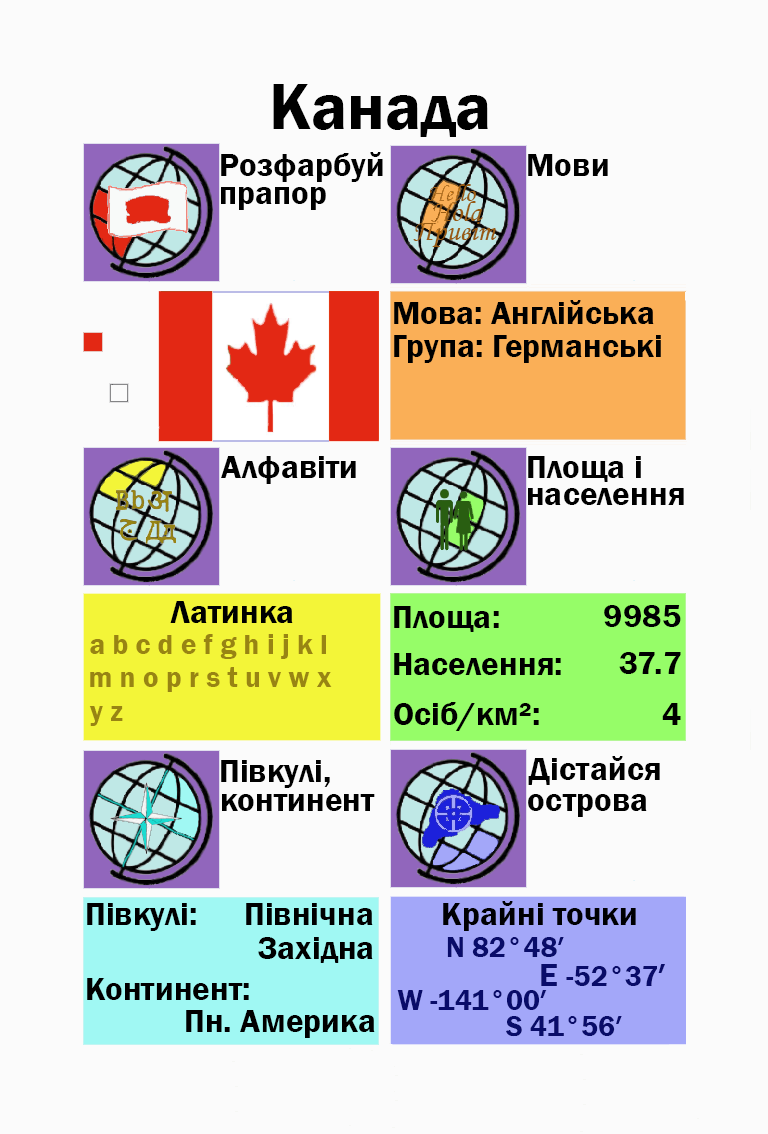
<style>
.page{position:relative;width:768px;height:1134px;background:#fbfbfb}
.page>*{position:absolute;margin:0}
.t1{font:66.7px "FranklinGothic-Demi";color:#000000}
.t2{font:33.3px "FranklinGothic-Demi";color:#000000}
.t3{font:33.3px "FranklinGothic-Demi";color:#000003}
.t4{font:29.2px "FranklinGothic-Demi";color:#988413}
.t5{font:29.2px "FranklinGothic-Demi";color:#090c69}
.t6{font:33.3px "FranklinGothic-Demi";color:#090c69}
</style>
<div class="page">
<p class="t1" style="left:273px;top:84px;width:215px;height:53px">Канада</p>
<p class="t2" style="left:221px;top:152px;width:162px;height:30px">Розфарбуй</p>
<p class="t2" style="left:528px;top:154px;width:80px;height:22px">Мови</p>
<p class="t2" style="left:221px;top:187px;width:105px;height:23px">прапор</p>
<p class="t2" style="left:394px;top:300px;width:260px;height:24px">Мова: Англійська</p>
<p class="t2" style="left:394px;top:335px;width:267px;height:28px">Група: Германські</p>
<p class="t2" style="left:221px;top:456px;width:135px;height:28px">Алфавіти</p>
<p class="t2" style="left:528px;top:456px;width:113px;height:26px">Площа і</p>
<p class="t2" style="left:528px;top:488px;width:156px;height:17px">населення</p>
<p class="t2" style="left:170px;top:601px;width:123px;height:22px">Латинка</p>
<p class="t2" style="left:394px;top:606px;width:105px;height:26px">Площа:</p>
<p class="t3" style="left:604px;top:605px;width:77px;height:22px">9985</p>
<p class="t4" style="left:90px;top:634px;width:236px;height:25px">a b c d e f g h i j k l</p>
<p class="t2" style="left:394px;top:653px;width:167px;height:22px">Населення:</p>
<p class="t2" style="left:619px;top:652px;width:62px;height:22px">37.7</p>
<p class="t4" style="left:90px;top:667px;width:242px;height:25px">m n o p r s t u v w x</p>
<p class="t2" style="left:394px;top:702px;width:145px;height:29px">Осіб/км²:</p>
<p class="t4" style="left:89px;top:706px;width:34px;height:20px">y z</p>
<p class="t2" style="left:662px;top:703px;width:19px;height:22px">4</p>
<p class="t2" style="left:221px;top:760px;width:109px;height:28px">Півкулі,</p>
<p class="t2" style="left:528px;top:756px;width:132px;height:29px">Дістайся</p>
<p class="t2" style="left:222px;top:794px;width:153px;height:17px">континент</p>
<p class="t2" style="left:528px;top:794px;width:119px;height:23px">острова</p>
<p class="t2" style="left:87px;top:903px;width:109px;height:28px">Півкулі:</p>
<p class="t2" style="left:246px;top:903px;width:127px;height:22px">Північна</p>
<p class="t3" style="left:443px;top:901px;width:193px;height:30px">Крайні точки</p>
<p class="t2" style="left:258px;top:937px;width:115px;height:26px">Західна</p>
<p class="t5" style="left:447px;top:937px;width:117px;height:20px">N 82°48′</p>
<p class="t5" style="left:541px;top:964px;width:124px;height:22px"><span class="t6">E </span>-52°37<span class="t6">′</span></p>
<p class="t2" style="left:87px;top:978px;width:162px;height:22px">Континент:</p>
<p class="t5" style="left:397px;top:990px;width:150px;height:20px">W -141°00′</p>
<p class="t2" style="left:186px;top:1010px;width:189px;height:28px">Пн. Америка</p>
<p class="t5" style="left:506px;top:1016px;width:116px;height:21px">S 41°56′</p>
</div>
